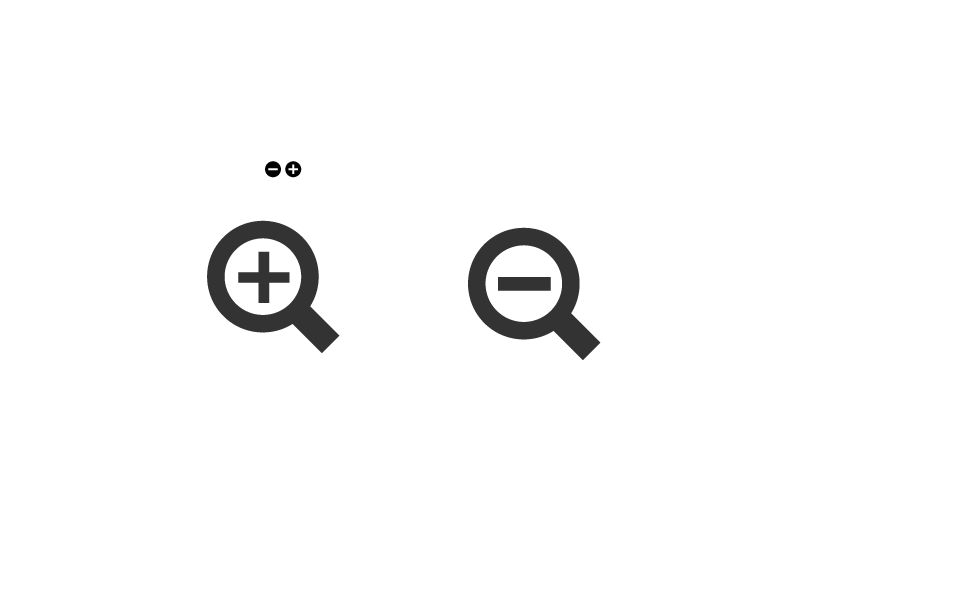
<style>
.page{position:relative;width:960px;height:600px;background:#ffffff}
.page>*{position:absolute;margin:0}
.t1{font:16px "WebSymbols-Regular";letter-spacing:0.01em;color:#000000}
</style>
<div class="page">
<p class="t1" style="left:265px;top:161px;width:37px;height:17px">- +</p>
</div>
